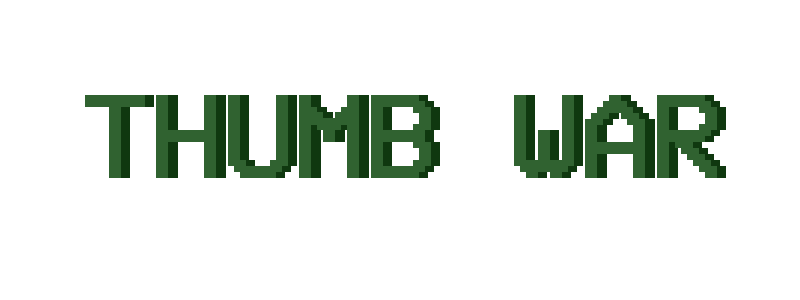
<style>
.page{position:relative;width:800px;height:300px;background:#ffffff}
.page>*{position:absolute;margin:0}
.t1{font:122px "VCROSDMono";color:#306230}
.t2{font:122px "VCROSDMono"}
</style>
<div class="page">
<p class="t1" style="left:85px;top:95px;width:632px;height:83px">THUMB WAR</p>
<p class="t2" style="left:94px;top:95px;width:632px;height:83px">THUMB WAR</p>
</div>
